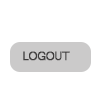
<style>
.page{position:relative;width:100px;height:100px;background:#ffffff}
.page>*{position:absolute;margin:0}
.t1{font:11.9px "MS Sans Serif";color:#3e3c3c;font-weight:bold;scale:0.91 1}
</style>
<div class="page">
<p class="t1" style="left:23px;top:51px;width:47px;height:10px">LOGOUT</p>
</div>
